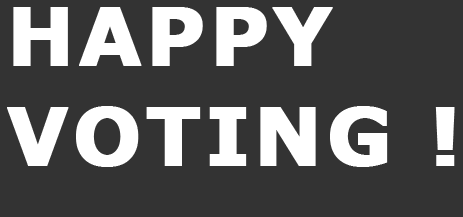
<style>
.page{position:relative;width:463px;height:217px;background:#333333}
.page>*{position:absolute;margin:0}
.t1{font:80px/100px "Verdana-Bold";letter-spacing:0.035em;color:#ffffff;text-transform:uppercase;font-weight:bold}
</style>
<div class="page">
<p class="t1" style="left:7px;top:7px;width:448px;height:160px">Happy<br>Voting !</p>
</div>
